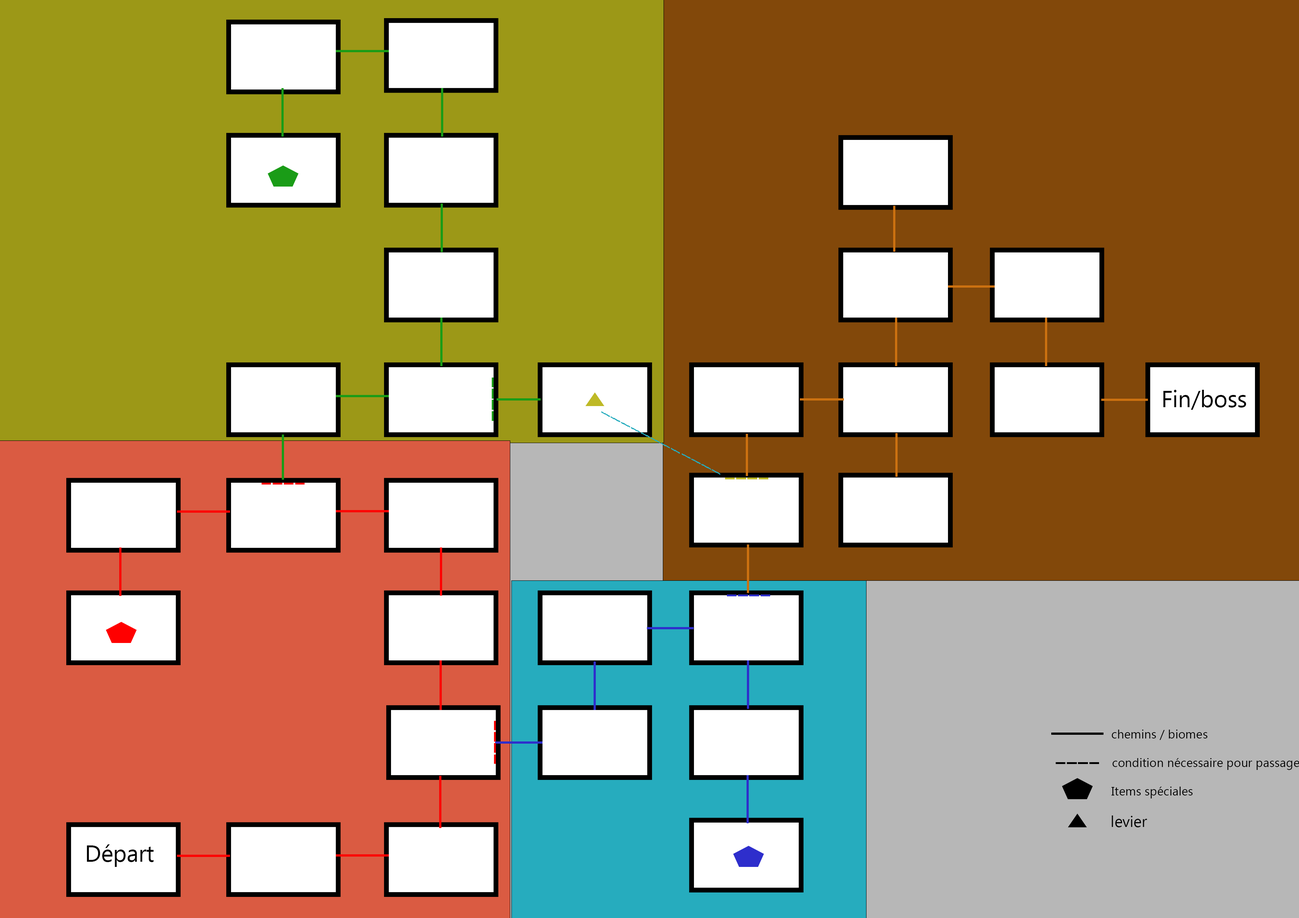
<style>
.page{position:relative;width:1299px;height:918px;background:#82480a}
.page>*{position:absolute;margin:0}
.t1{font:23.1px "Ebrima";color:#000000}
.t2{font:12.3px "Ebrima";color:#000000}
.t3{font:15.4px "Ebrima";color:#000000}
</style>
<div class="page">
<p class="t1" style="left:1163px;top:390px;width:83px;height:20px">Fin/boss</p>
<p class="t2" style="left:1111px;top:730px;width:96px;height:10px">chemins / biomes</p>
<p class="t2" style="left:1112px;top:758px;width:187px;height:12px">condition nécessaire pour passage</p>
<p class="t2" style="left:1111px;top:787px;width:81px;height:12px">Items spéciales</p>
<p class="t3" style="left:1111px;top:816px;width:36px;height:11px">levier</p>
<p class="t1" style="left:87px;top:844px;width:67px;height:23px">Départ</p>
</div>
